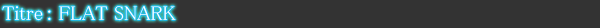
<style>
.page{position:relative;width:600px;height:28px;background:#333333}
.page>*{position:absolute;margin:0}
.t1{font:20px "MS-PMincho";color:#ffffff}
</style>
<div class="page">
<p class="t1" style="left:2px;top:6px;width:174px;height:15px">Titre : FLAT SNARK</p>
</div>
